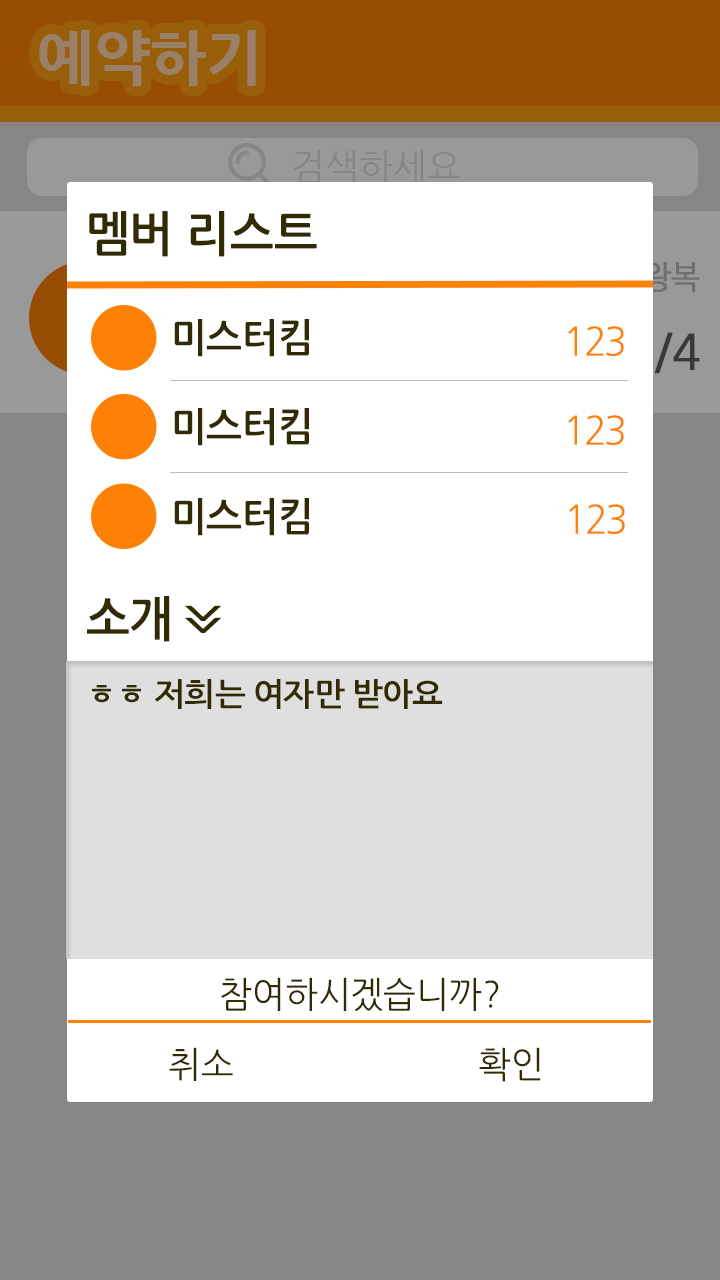
<style>
.page{position:relative;width:720px;height:1280px;background:#ffffff}
.page>*{position:absolute;margin:0}
.t1{font:60px "NanumGothicExtraBold";color:#998067}
.t2{font:36px "NanumGothic";color:#868686}
.t3{font:48px "NanumGothicBold";color:#302b02;scale:0.97 1}
.t4{font:39.3px "NanumGothicBold";color:#302b02;scale:0.97 1}
.t5{font:39.3px "NanumGothic";letter-spacing:-0.06em;color:#fd8107;scale:0.97 1}
.t6{font:36px "NanumGothicExtraBold";letter-spacing:-0.24em;color:#302b02;scale:0.97 1}
.t7{font:31.6px "NanumGothicBold";letter-spacing:-0.025em;color:#302b02;scale:1.04 1}
.t8{font:36px "NanumGothic";color:#302b02;scale:0.97 1}
</style>
<div class="page">
<p class="t1" style="left:39px;top:30px;width:217px;height:56px">예약하기</p>
<p class="t2" style="left:294px;top:150px;width:166px;height:33px">검색하세요</p>
<p class="t3" style="left:89px;top:211px;width:228px;height:46px">멤버 리스트</p>
<p class="t4" style="left:174px;top:319px;width:135px;height:38px">미스터킴</p>
<p class="t5" style="left:568px;top:326px;width:56px;height:30px">123</p>
<p class="t4" style="left:174px;top:408px;width:135px;height:38px">미스터킴</p>
<p class="t5" style="left:568px;top:415px;width:56px;height:30px">123</p>
<p class="t4" style="left:174px;top:498px;width:135px;height:38px">미스터킴</p>
<p class="t5" style="left:569px;top:504px;width:56px;height:30px">123</p>
<p class="t3" style="left:87px;top:596px;width:83px;height:46px">소개</p>
<p class="t6" style="left:185px;top:605px;width:36px;height:28px;rotate:90deg">&gt;&gt;</p>
<p class="t7" style="left:92px;top:679px;width:351px;height:30px">ㅎㅎ 저희는 여자만 받아요</p>
<p class="t8" style="left:221px;top:977px;width:278px;height:34px">참여하시겠습니까?</p>
<p class="t8" style="left:169px;top:1047px;width:64px;height:34px">취소</p>
<p class="t8" style="left:479px;top:1047px;width:62px;height:35px">확인</p>
</div>
